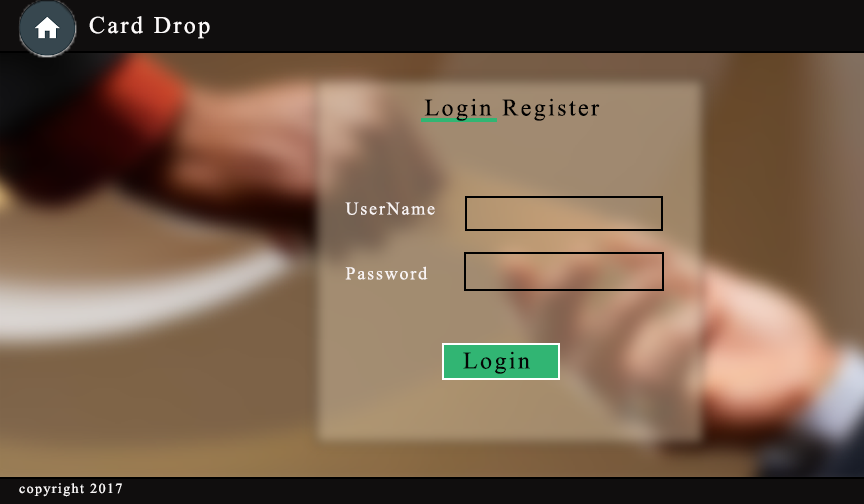
<style>
.page{position:relative;width:864px;height:504px}
.page>*{position:absolute;margin:0}
.t1{font:24px "TimesNewRomanPSMT";letter-spacing:0.1em;color:#fdfafa}
.t2{font:24px "TimesNewRomanPSMT";letter-spacing:0.1em;color:#000000}
.t3{font:18px "TimesNewRomanPSMT";letter-spacing:0.1em;color:#f9f4f4}
.t4{font:24px "TimesNewRomanPSMT";letter-spacing:0.1em;color:#050505}
.t5{font:14px "TimesNewRomanPSMT";letter-spacing:0.1em;color:#f8f6f6}
</style>
<div class="page">
<p class="t1" style="left:89px;top:16px;width:121px;height:23px">Card Drop</p>
<p class="t2" style="left:424px;top:98px;width:176px;height:23px">Login Register</p>
<p class="t3" style="left:345px;top:202px;width:90px;height:78px">UserName<br><br><br>Password</p>
<p class="t4" style="left:463px;top:351px;width:67px;height:23px">Login</p>
<p class="t5" style="left:19px;top:483px;width:103px;height:14px">copyright 2017</p>
</div>
